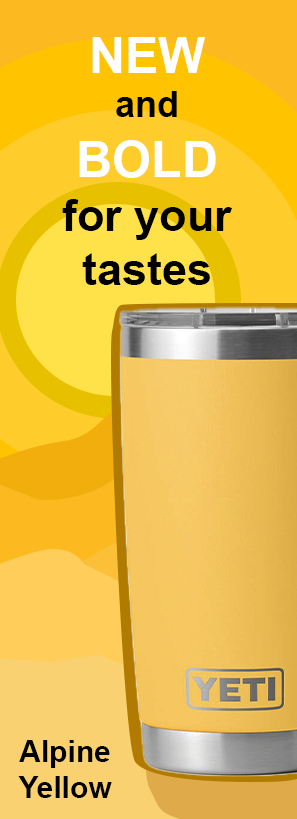
<style>
.page{position:relative;width:297px;height:819px}
.page>*{position:absolute;margin:0}
.t1{font:45px "Arial-BoldMT";color:#000000}
.t2{font:50px "Arial-BoldMT";color:#ffffff}
.t3{font:36px "Arial-BoldMT";color:#000000}
.t4{font:30px "Arial-BoldMT";color:#000000}
</style>
<div class="page">
<p class="t1" style="left:62px;top:37px;width:170px;height:248px;text-align:center"><span class="t2">NEW<br></span><span class="t3">and<br></span><span class="t2">BOLD<br></span>for your tastes</p>
<p class="t4" style="left:18px;top:740px;width:94px;height:58px;text-align:center">Alpine Yellow</p>
</div>
